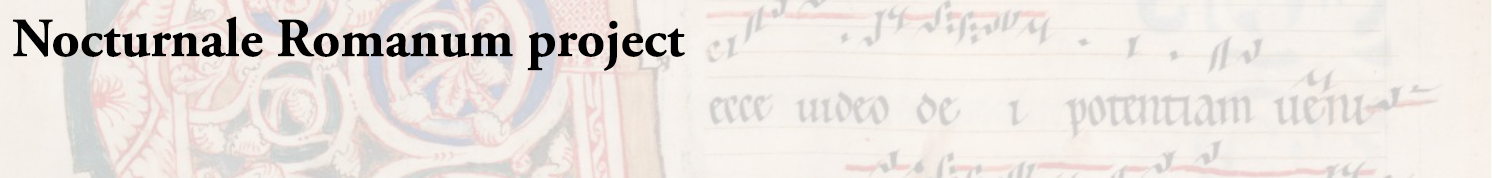
<style>
.page{position:relative;width:1492px;height:178px}
.page>*{position:absolute;margin:0}
.t1{font:55px "AGaramondPro-Bold";color:#000000}
</style>
<div class="page">
<p class="t1" style="left:12px;top:16px;width:673px;height:55px">Nocturnale Romanum project</p>
</div>
